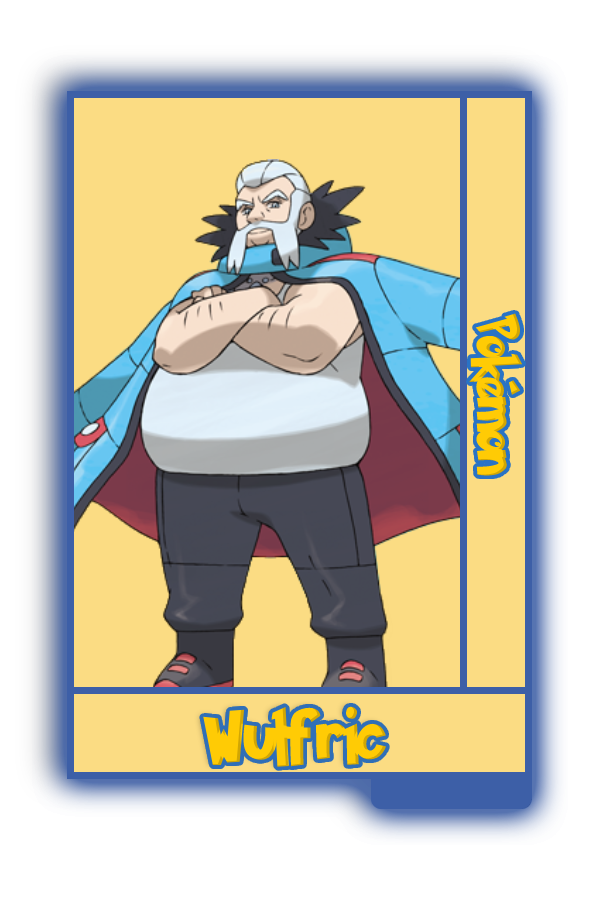
<style>
.page{position:relative;width:600px;height:900px;background:#fbdc83}
.page>*{position:absolute;margin:0}
.t1{font:48.8px "PokemonSolidNormal";color:#ffcb05;scale:0.8 1}
.t2{font:56.6px "PokemonSolidNormal";color:#ffcb05;scale:0.92 1}
</style>
<div class="page">
<p class="t1" style="left:469px;top:313px;width:54px;height:163px;rotate:90deg">Pokémon</p>
<p class="t2" style="left:203px;top:706px;width:183px;height:61px">Wulfric</p>
</div>
